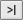
<style>
.page{position:relative;width:23px;height:20px;background:#e7e7e7}
.page>*{position:absolute;margin:0}
.t1{font:12px "ErasITC-Demi";letter-spacing:-0.1em;color:#353535}
</style>
<div class="page">
<p class="t1" style="left:7px;top:5px;width:9px;height:10px">&gt;|</p>
</div>
